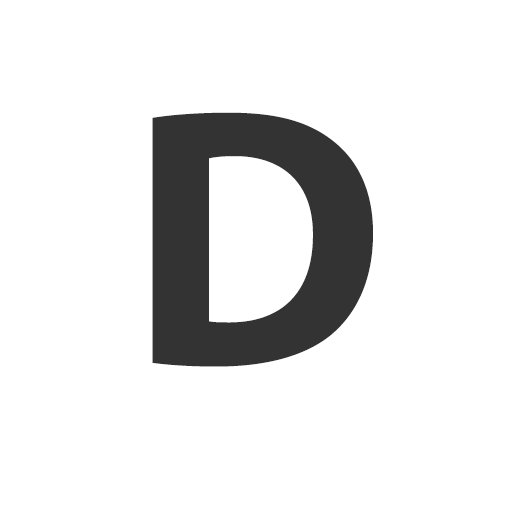
<style>
.page{position:relative;width:512px;height:512px;background:#ffffff}
.page>*{position:absolute;margin:0}
.t1{font:370px "MyriadPro-Bold";color:#333333}
</style>
<div class="page">
<p class="t1" style="left:152px;top:112px;width:221px;height:255px">D</p>
</div>
